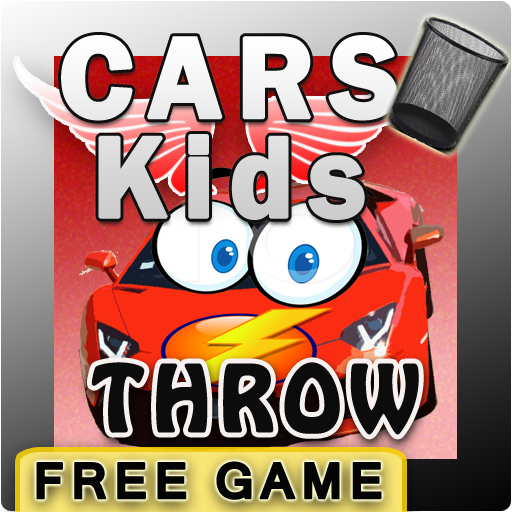
<style>
.page{position:relative;width:512px;height:512px}
.page>*{position:absolute;margin:0}
.t1{font:119.4px "FranklinGothic-Demi";letter-spacing:0.1em;color:#ececec;font-weight:bold}
.t2{font:80px "HoboStd";letter-spacing:0.1em;color:#0c0c0c;font-weight:bold}
.t3{font:48px "Kartika-Bold";letter-spacing:0.1em;color:#040404;font-weight:bold}
</style>
<div class="page">
<p class="t1" style="left:61px;top:35px;width:336px;height:185px">CARS Kids</p>
<p class="t2" style="left:91px;top:362px;width:328px;height:73px">THROW</p>
<p class="t3" style="left:36px;top:461px;width:346px;height:39px">FREE GAME</p>
</div>
